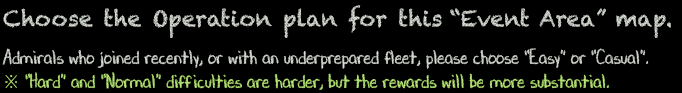
<style>
.page{position:relative;width:682px;height:93px;background:#000000}
.page>*{position:absolute;margin:0}
.t1{font:22px "Chalkduster";color:#c5cac3}
.t2{font:20px/24px "DJBChalkItUp";color:#d9ded6;scale:0.85 1}
.t3{font:20px/24px "TimesNewRomanPSMT";color:#bdef78;scale:0.85 1}
.t4{font:20px/24px "DJBChalkItUp";color:#bdef78;scale:0.85 1}
</style>
<div class="page">
<p class="t1" style="left:3px;top:5px;width:668px;height:33px">Choose the Operation plan for this “Event Area” map.</p>
<p class="t2" style="left:2px;top:48px;width:647px;height:42px">Admirals who joined recently, or with an underprepared fleet, please choose “Easy” or “Casual”.<br><span class="t3">※</span><span class="t4"> “Hard” and “Normal” difficulties are harder, but the rewards will be more substantial.</span></p>
</div>
